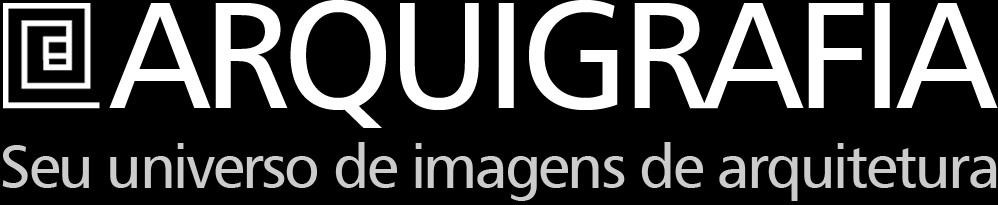
<style>
.page{position:relative;width:998px;height:205px;background:#000000}
.page>*{position:absolute;margin:0}
.t1{font:151px "Humanist777BT-RomanB";letter-spacing:-0.04em;color:#ffffff;text-transform:uppercase}
.t2{font:61px "Humanist777BT-RomanB";letter-spacing:-0.04em;color:#cccccc}
</style>
<div class="page">
<p class="t1" style="left:109px;top:0px;width:889px;height:128px">ARQUIGRAFIA</p>
<p class="t2" style="left:2px;top:142px;width:995px;height:59px">Seu universo de imagens de arquitetura</p>
</div>
